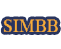
<style>
.page{position:relative;width:61px;height:49px;background:#ffffff}
.page>*{position:absolute;margin:0}
.t1{font:18px "MS Serif";color:#f8ad36}
</style>
<div class="page">
<p class="t1" style="left:3px;top:19px;width:55px;height:13px">SIMBB</p>
</div>
